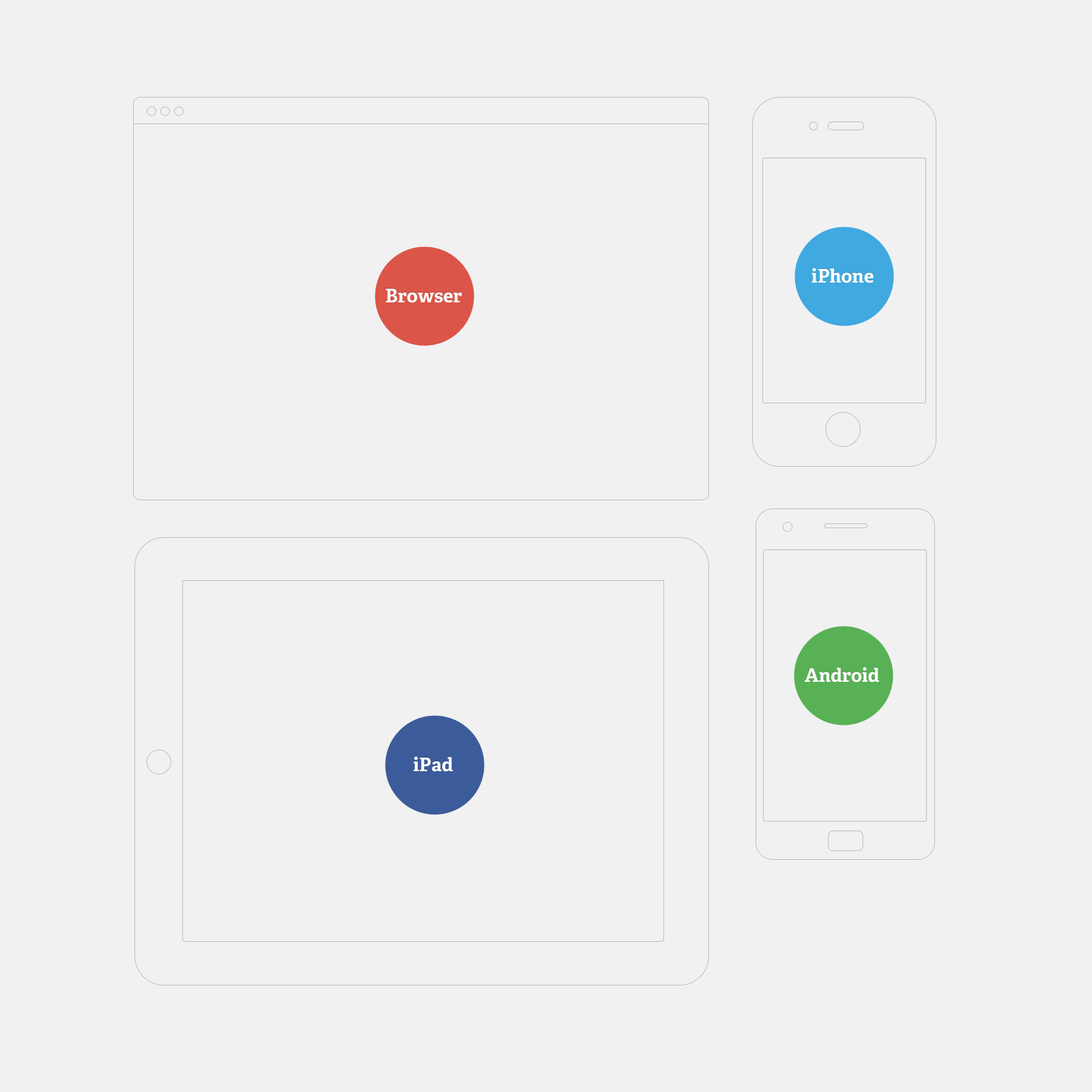
<style>
.page{position:relative;width:1092px;height:1092px;background:#f1f1f1}
.page>*{position:absolute;margin:0}
.t1{font:18.8px "AdelleBasic-Bold";color:#ffffff}
</style>
<div class="page">
<p class="t1" style="left:811px;top:268px;width:63px;height:15px">iPhone</p>
<p class="t1" style="left:386px;top:289px;width:76px;height:14px">Browser</p>
<p class="t1" style="left:805px;top:667px;width:74px;height:15px">Android</p>
<p class="t1" style="left:414px;top:756px;width:39px;height:16px">iPad</p>
</div>
